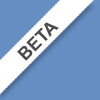
<style>
.page{position:relative;width:100px;height:100px;background:#658ec2}
.page>*{position:absolute;margin:0}
.t1{font:18px "Arial-BoldMT";color:#4b4b4b}
</style>
<div class="page">
<p class="t1" style="left:17px;top:22px;width:42px;height:39px;rotate:-45deg">BETA</p>
</div>
